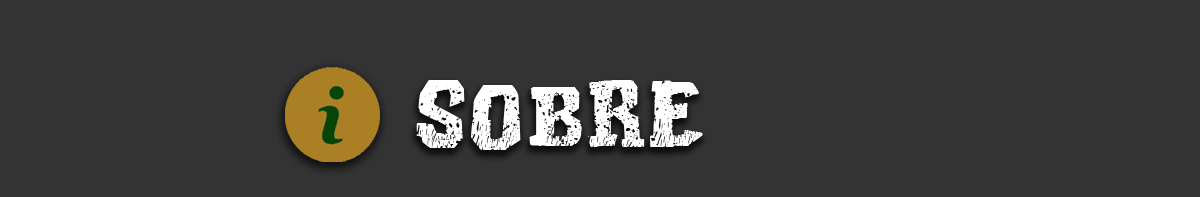
<style>
.page{position:relative;width:1200px;height:197px;background:#333333}
.page>*{position:absolute;margin:0}
.t1{font:90.1px "CordelEncarnado";color:#ffffff}
</style>
<div class="page">
<p class="t1" style="left:416px;top:80px;width:287px;height:70px">SOBRE</p>
</div>
